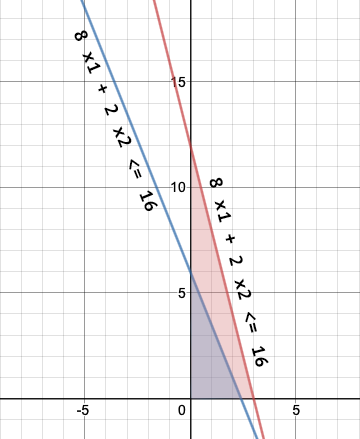
<style>
.page{position:relative;width:360px;height:439px;background:#ffffff}
.page>*{position:absolute;margin:0}
.t1{font:18px "PTMono-Bold";letter-spacing:0.04em;color:#000000}
</style>
<div class="page">
<p class="t1" style="left:74px;top:30px;width:84px;height:181px;rotate:68deg">8 x1 + 2 x2 &lt;= 16</p>
<p class="t1" style="left:209px;top:177px;width:60px;height:190px;rotate:76deg">8 x1 + 2 x2 &lt;= 16</p>
</div>
